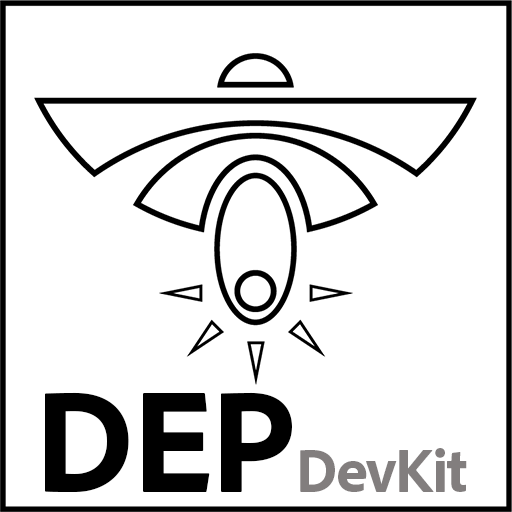
<style>
.page{position:relative;width:512px;height:512px;background:#ffffff}
.page>*{position:absolute;margin:0}
.t1{font:62.5px "AdobeClean-ExtraBold";letter-spacing:-0.025em;color:#827e7e}
.t2{font:150px "AdobeClean-ExtraBold";letter-spacing:-0.025em;color:#000000}
</style>
<div class="page">
<p class="t1" style="left:45px;top:392px;width:422px;height:100px"><span class="t2">DEP</span>DevKit</p>
</div>
